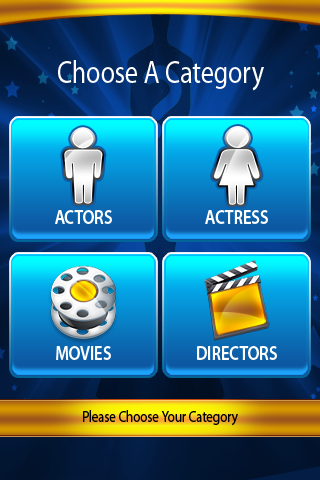
<style>
.page{position:relative;width:320px;height:480px}
.page>*{position:absolute;margin:0}
.t1{font:31.6px "MyriadPro-Regular";color:#ffffff;scale:0.83 1}
.t2{font:20px "MyriadPro-Semibold";color:#ffffff;text-transform:uppercase;scale:0.83 1}
.t3{font:16px "MyriadPro-Regular";letter-spacing:-0.01em;color:#000000;scale:0.83 1}
</style>
<div class="page">
<p class="t1" style="left:58px;top:60px;width:206px;height:31px">Choose A Category</p>
<p class="t2" style="left:55px;top:210px;width:57px;height:14px">Actors</p>
<p class="t2" style="left:205px;top:210px;width:63px;height:14px">Actress</p>
<p class="t2" style="left:56px;top:346px;width:55px;height:14px">movies</p>
<p class="t2" style="left:197px;top:346px;width:80px;height:14px">directors</p>
<p class="t3" style="left:83px;top:410px;width:155px;height:16px">Please Choose Your Category</p>
</div>
